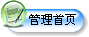
<style>
.page{position:relative;width:89px;height:37px;background:#ffffff}
.page>*{position:absolute;margin:0}
.t1{font:12px "SimSun";color:#000000}
</style>
<div class="page">
<p class="t1" style="left:29px;top:14px;width:47px;height:11px">管理首页</p>
</div>
